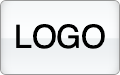
<style>
.page{position:relative;width:120px;height:75px}
.page>*{position:absolute;margin:0}
.t1{font:32px "Helvetica";color:#000000}
</style>
<div class="page">
<p class="t1" style="left:16px;top:24px;width:89px;height:25px">LOGO</p>
</div>
